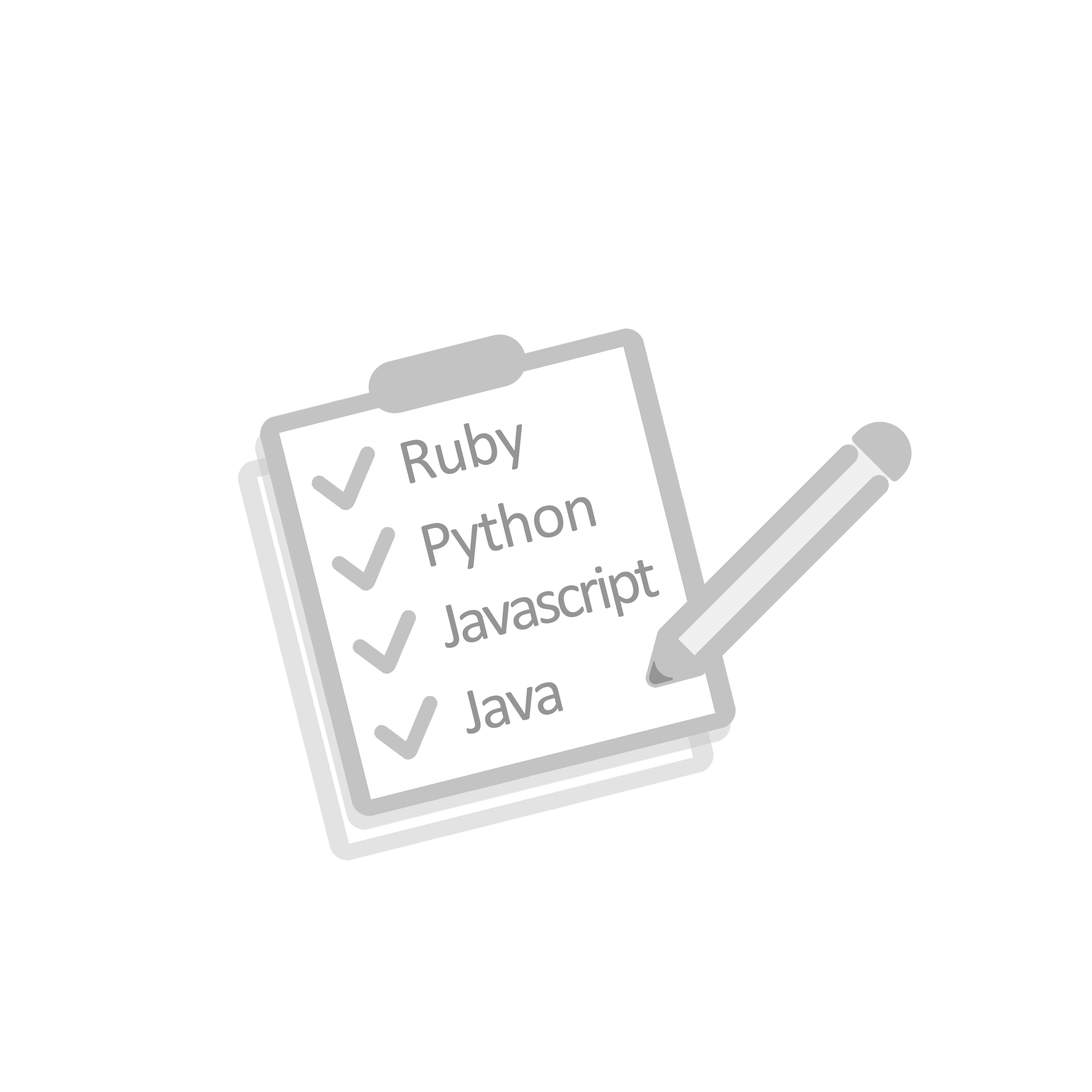
<style>
.page{position:relative;width:1092px;height:1092px;background:#ffffff}
.page>*{position:absolute;margin:0}
.t1{font:65.5px "Calibri";letter-spacing:-0.025em;color:#959595}
.t2{font:65.5px "Calibri";letter-spacing:-0.065em;color:#959595}
.t3{font:65.5px "Calibri";letter-spacing:-0.05em;color:#959595}
</style>
<div class="page">
<p class="t1" style="left:400px;top:423px;width:122px;height:61px;rotate:-14deg">Ruby</p>
<p class="t1" style="left:421px;top:497px;width:175px;height:72px;rotate:-14deg">Python</p>
<p class="t2" style="left:445px;top:560px;width:215px;height:88px;rotate:-14deg">Javascript</p>
<p class="t3" style="left:466px;top:682px;width:97px;height:52px;rotate:-14deg">Java</p>
</div>
